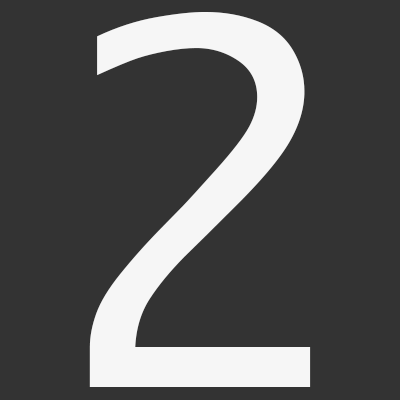
<style>
.page{position:relative;width:400px;height:400px;background:#333333}
.page>*{position:absolute;margin:0}
.t1{font:480px "Monaco";color:#f6f6f6}
</style>
<div class="page">
<p class="t1" style="left:89px;top:12px;width:222px;height:375px">2</p>
</div>
